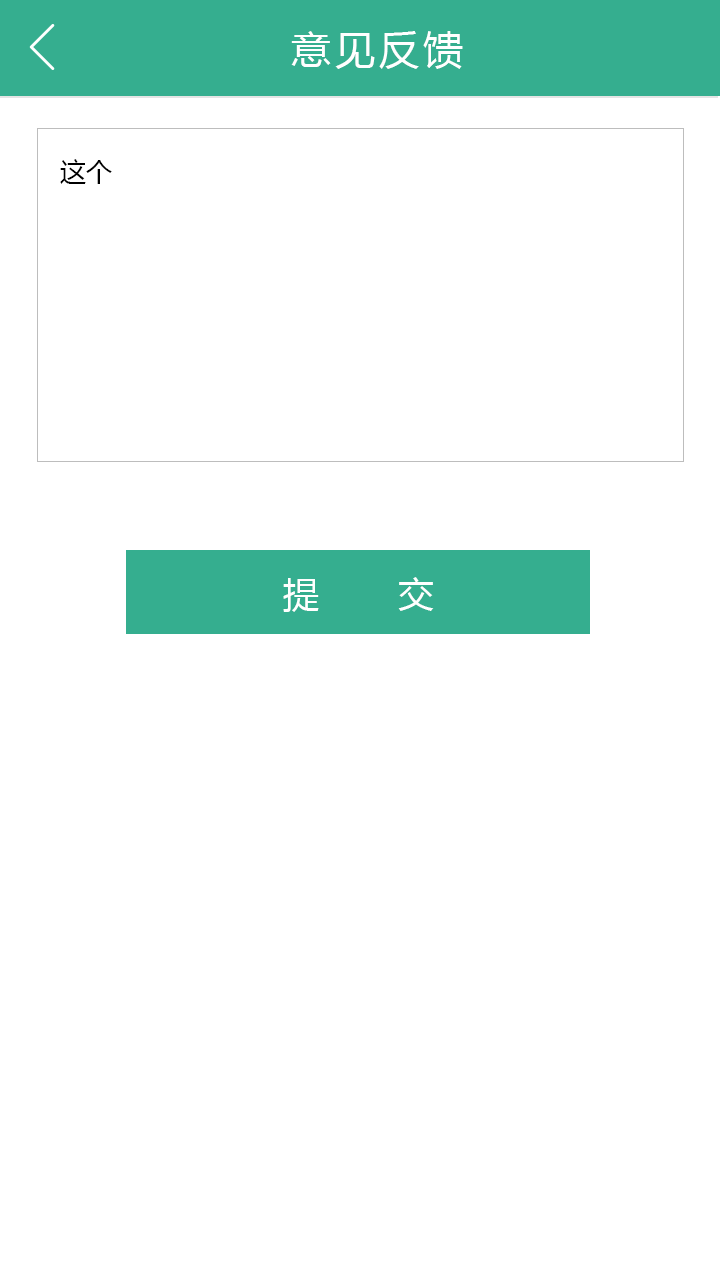
<style>
.page{position:relative;width:720px;height:1280px;background:#ffffff}
.page>*{position:absolute;margin:0}
.t1{font:40px "MicrosoftYaHei";letter-spacing:0.1em;color:#ffffff}
.t2{font:26px "MicrosoftYaHei";color:#000000}
.t3{font:36px "MicrosoftYaHei";letter-spacing:0.2em;color:#ffffff}
</style>
<div class="page">
<p class="t1" style="left:291px;top:31px;width:172px;height:38px">意见反馈</p>
<p class="t2" style="left:60px;top:159px;width:52px;height:25px">这个</p>
<p class="t3" style="left:283px;top:577px;width:151px;height:35px">提    交</p>
</div>
